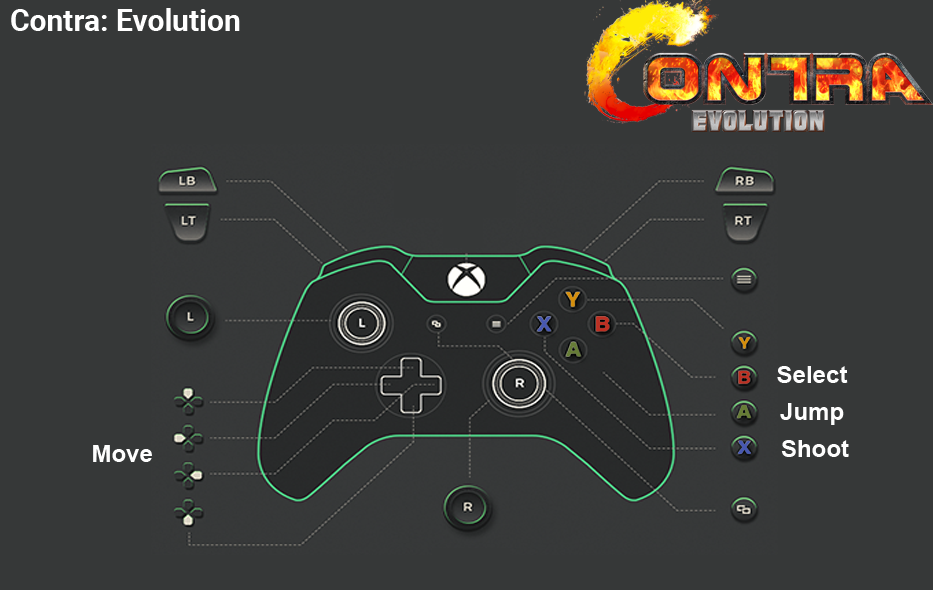
<style>
.page{position:relative;width:933px;height:590px;background:#363838}
.page>*{position:absolute;margin:0}
.t1{font:30px "Roboto-Bold";color:#ffffff}
.t2{font:24px "Arial-BoldMT";color:#fefefe}
</style>
<div class="page">
<p class="t1" style="left:11px;top:8px;width:229px;height:23px">Contra: Evolution</p>
<p class="t2" style="left:777px;top:366px;width:71px;height:17px">Select</p>
<p class="t2" style="left:780px;top:403px;width:64px;height:22px">Jump</p>
<p class="t2" style="left:93px;top:445px;width:59px;height:17px">Move</p>
<p class="t2" style="left:781px;top:440px;width:68px;height:17px">Shoot</p>
</div>
